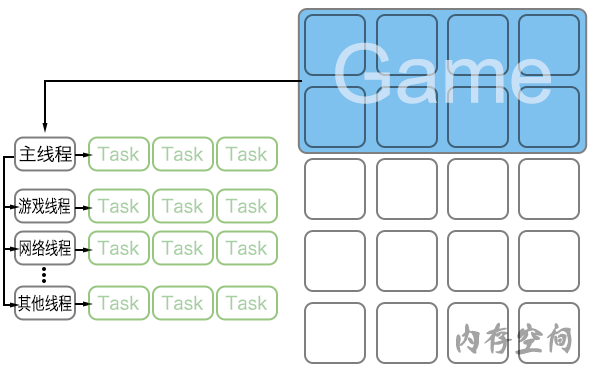
<style>
.page{position:relative;width:596px;height:382px;background:#ffffff}
.page>*{position:absolute;margin:0}
.t1{font:82px "ArialMT";color:#c6e1f7}
.t2{font:18px "HiraginoSansGB-W3";color:#000000}
.t3{font:18px "HiraginoSansGB-W3";color:#a8cfa3}
.t4{font:18px "HiraginoSansGB-W3";color:#000000;scale:0.72 1}
.t5{font:18px "HiraginoSansGB-W3";color:#000000;scale:0.73 1}
.t6{font:18px "HiraginoSansGB-W3";color:#000000;scale:0.76 1}
.t7{font:30.6px "GSZL--HSJHDT-0";color:#a3a3a3}
</style>
<div class="page">
<p class="t1" style="left:335px;top:42px;width:216px;height:62px">Game</p>
<p class="t2" style="left:19px;top:145px;width:53px;height:18px">主线程</p>
<p class="t3" style="left:97px;top:146px;width:43px;height:15px">Task</p>
<p class="t3" style="left:161px;top:146px;width:43px;height:15px">Task</p>
<p class="t3" style="left:225px;top:146px;width:43px;height:15px">Task</p>
<p class="t4" style="left:18px;top:197px;width:52px;height:18px">游戏线程</p>
<p class="t3" style="left:97px;top:198px;width:43px;height:15px">Task</p>
<p class="t3" style="left:161px;top:198px;width:43px;height:15px">Task</p>
<p class="t3" style="left:225px;top:198px;width:43px;height:15px">Task</p>
<p class="t5" style="left:19px;top:239px;width:52px;height:18px">网络线程</p>
<p class="t3" style="left:97px;top:240px;width:43px;height:15px">Task</p>
<p class="t3" style="left:161px;top:240px;width:43px;height:15px">Task</p>
<p class="t3" style="left:225px;top:240px;width:43px;height:15px">Task</p>
<p class="t6" style="left:18px;top:294px;width:54px;height:18px">其他线程</p>
<p class="t3" style="left:97px;top:295px;width:43px;height:15px">Task</p>
<p class="t3" style="left:161px;top:295px;width:43px;height:15px">Task</p>
<p class="t3" style="left:225px;top:295px;width:43px;height:15px">Task</p>
<p class="t7" style="left:456px;top:322px;width:116px;height:33px">内存空间</p>
</div>
